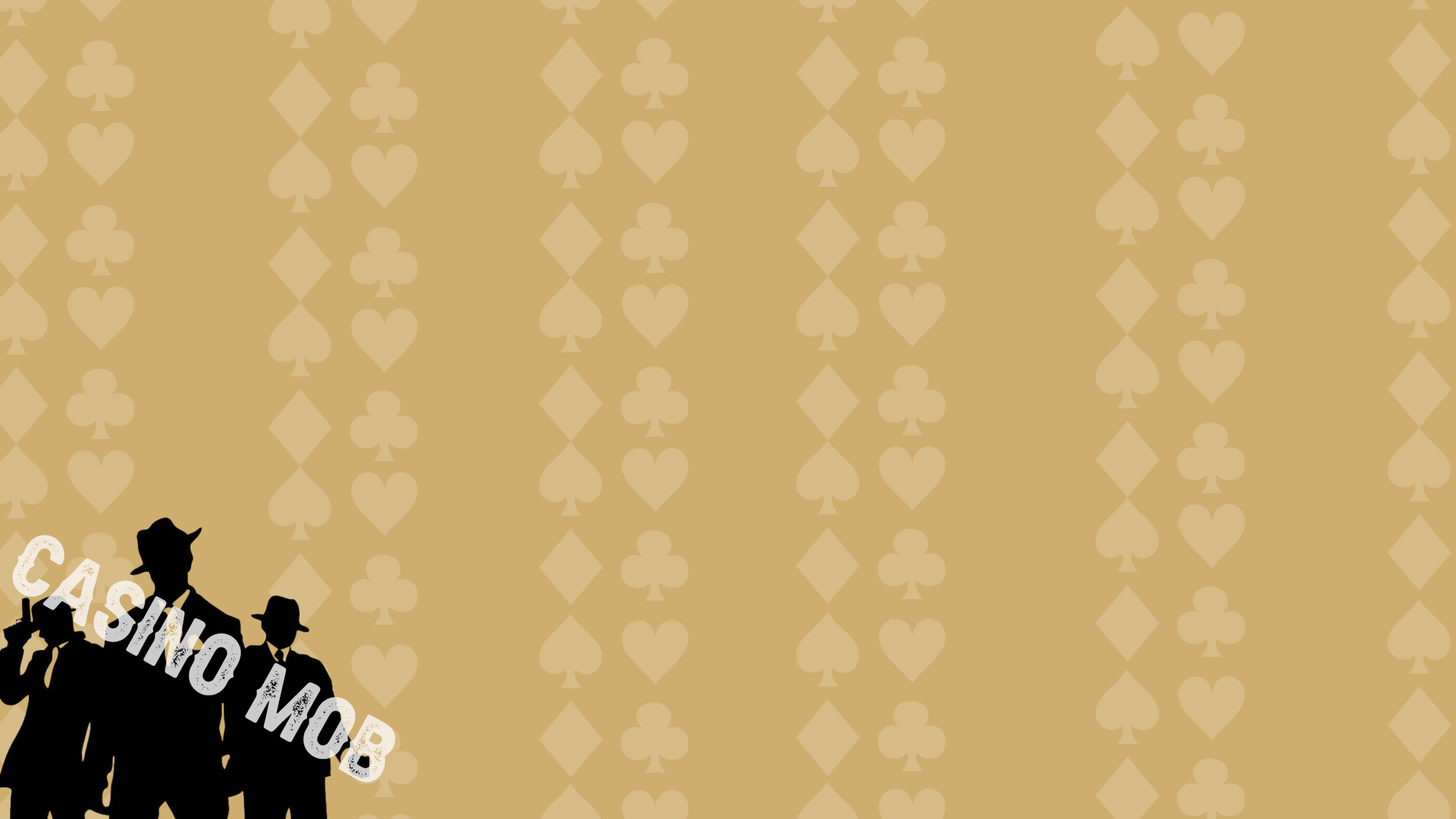
<style>
.page{position:relative;width:1456px;height:819px;background:#ceae6f}
.page>*{position:absolute;margin:0}
.t1{font:54.5px "AldivaroStampDemo-Stamp"}
</style>
<div class="page">
<p class="t1" style="left:12px;top:535px;width:384px;height:248px;rotate:29deg">Casino Mob</p>
</div>
